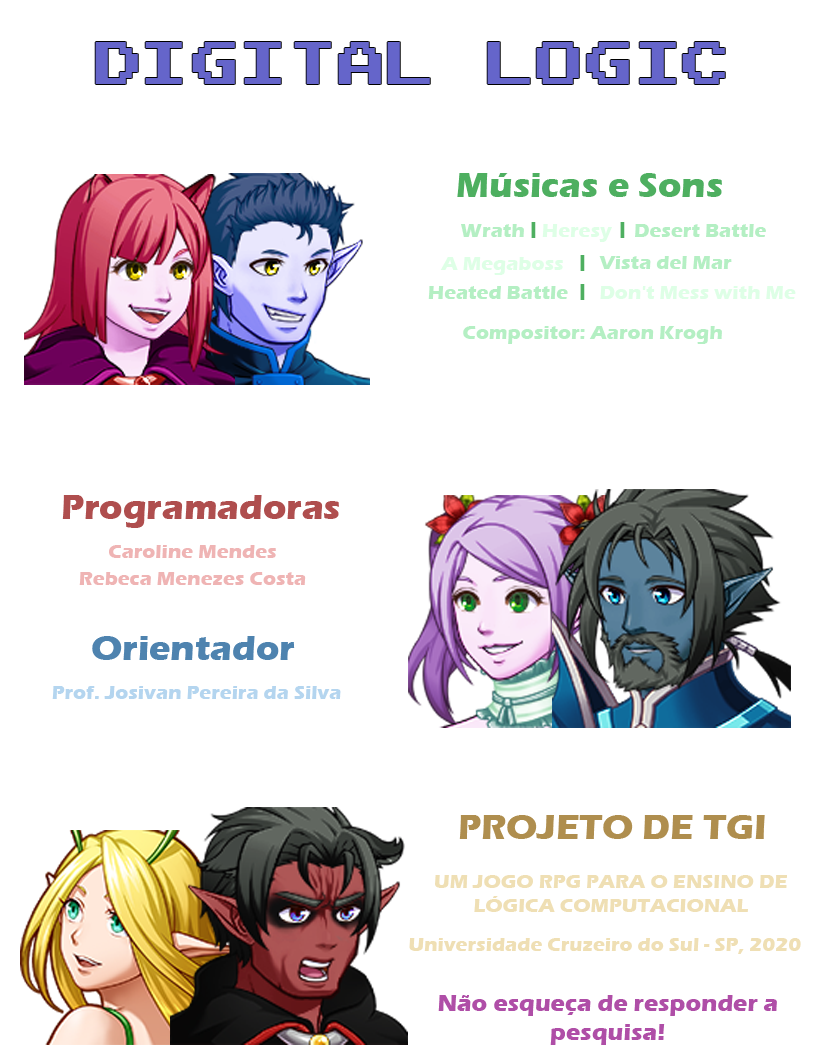
<style>
.page{position:relative;width:816px;height:1058px;background:#ffffff}
.page>*{position:absolute;margin:0}
.t1{font:60px "JoystixMonospace-Regular";color:#6565ca}
.t2{font:36px "ErasITC-Bold";color:#4eaf60}
.t3{font:20px "ErasITC-Bold";color:#4eaf60}
.t4{font:20px "ErasITC-Bold";color:#b4efc3}
.t5{font:20px "ErasITC-Bold";color:#deffe6}
.t6{font:18px "ErasITC-Bold";color:#6565ca}
.t7{font:36px "ErasITC-Bold";color:#af4e4e}
.t8{font:20px "ErasITC-Bold";color:#efb4b4}
.t9{font:36px "ErasITC-Bold";color:#4e83af}
.t10{font:20px "ErasITC-Bold";color:#b4d5ef}
.t11{font:36px "ErasITC-Bold";color:#af8e4e}
.t12{font:20px "ErasITC-Bold";color:#efdfb4}
.t13{font:24px "ErasITC-Bold";color:#af4ea7}
</style>
<div class="page">
<p class="t1" style="left:95px;top:42px;width:630px;height:42px">DIGITAL LOGIC</p>
<p class="t2" style="left:457px;top:173px;width:265px;height:24px">Músicas e Sons</p>
<p class="t3" style="left:531px;top:222px;width:5px;height:16px">|</p>
<p class="t3" style="left:620px;top:222px;width:5px;height:16px">|</p>
<p class="t4" style="left:461px;top:224px;width:63px;height:13px">Wrath</p>
<p class="t5" style="left:542px;top:224px;width:70px;height:18px"><span class="t6"> </span>Heresy</p>
<p class="t4" style="left:635px;top:224px;width:131px;height:13px">Desert Battle</p>
<p class="t5" style="left:440px;top:257px;width:123px;height:18px">A Megaboss</p>
<p class="t3" style="left:580px;top:255px;width:5px;height:16px">|</p>
<p class="t4" style="left:599px;top:256px;width:133px;height:13px">Vista del Mar</p>
<p class="t4" style="left:428px;top:286px;width:140px;height:13px"><span class="t6"> </span>Heated Battle</p>
<p class="t3" style="left:580px;top:284px;width:5px;height:16px">|</p>
<p class="t5" style="left:600px;top:286px;width:196px;height:13px">Don't Mess with Me</p>
<p class="t4" style="left:463px;top:326px;width:259px;height:18px">Compositor: Aaron Krogh</p>
<p class="t7" style="left:62px;top:495px;width:277px;height:33px">Programadoras</p>
<p class="t8" style="left:109px;top:545px;width:167px;height:13px">Caroline Mendes</p>
<p class="t8" style="left:79px;top:572px;width:227px;height:13px">Rebeca Menezes Costa</p>
<p class="t9" style="left:92px;top:636px;width:203px;height:24px">Orientador</p>
<p class="t10" style="left:52px;top:686px;width:289px;height:13px">Prof. Josivan Pereira da Silva</p>
<p class="t11" style="left:459px;top:815px;width:306px;height:24px">PROJETO DE TGI</p>
<p class="t12" style="left:435px;top:875px;width:352px;height:37px;text-align:center">UM JOGO RPG PARA O ENSINO DE<br>LÓGICA COMPUTACIONAL</p>
<p class="t12" style="left:409px;top:938px;width:392px;height:16px">Universidade Cruzeiro do Sul - SP, 2020</p>
<p class="t13" style="left:438px;top:995px;width:339px;height:50px;text-align:center">Não esqueça de responder a pesquisa!</p>
</div>
